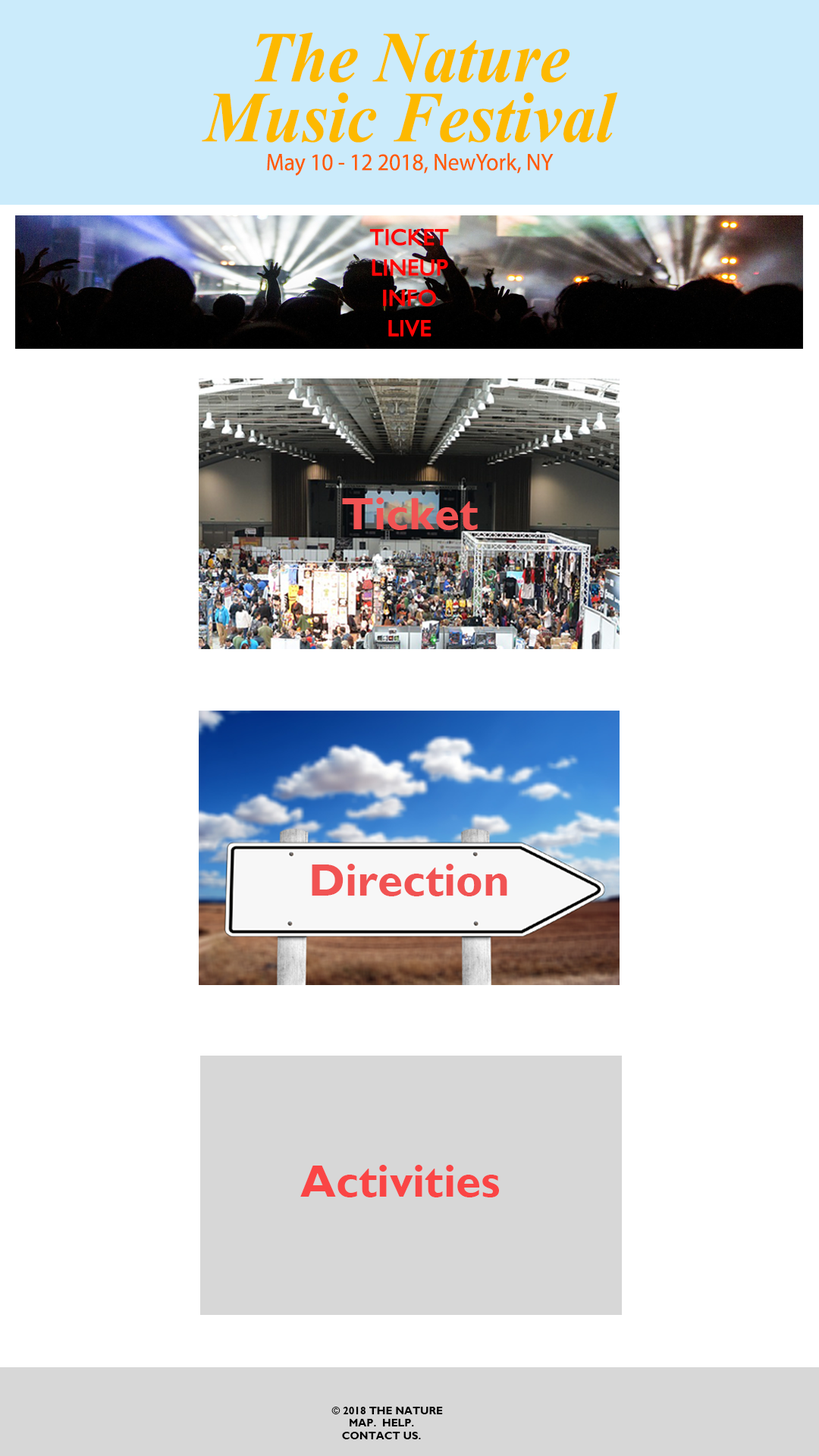
<style>
.page{position:relative;width:819px;height:1456px;background:#ffffff}
.page>*{position:absolute;margin:0}
.t1{font:24px "MyriadPro-Regular";color:#ff5d04;scale:0.94 1}
.t2{font:72px/60px "TimesNewRomanPS-BoldItalicMT";color:#fdb900;scale:0.94 1}
.t3{font:22.7px/15.2px "GillSansMT";color:#ff0505;text-transform:uppercase;font-weight:bold}
.t4{font:45.5px "GillSansMT-Bold";color:#f15353}
.t5{font:45.5px "GillSansMT-Bold";color:#fa4545}
.t6{font:10.6px "GillSansMT-Bold";color:#000000}
.t7{font:10.6px "GillSansMT-Bold";color:#ff0000}
</style>
<div class="page">
<p class="t1" style="left:202px;top:33px;width:416px;height:143px;text-align:center"><span class="t2">The Nature <br>Music Festival<br></span>May 10 - 12 2018, NewYork, NY</p>
<p class="t3" style="left:369px;top:228px;width:80px;height:109px;text-align:center">Ticket<br><br>Lineup<br><br>INFO<br><br>LIVE</p>
<p class="t4" style="left:342px;top:497px;width:136px;height:33px">Ticket</p>
<p class="t4" style="left:312px;top:864px;width:195px;height:32px">Direction</p>
<p class="t5" style="left:300px;top:1165px;width:199px;height:32px">Activities</p>
<p class="t6" style="left:331px;top:1407px;width:112px;height:32px;text-align:center"><span class="t7">    </span>© 2018 THE NATURE <br>MAP.  HELP. <br>CONTACT US.</p>
</div>
